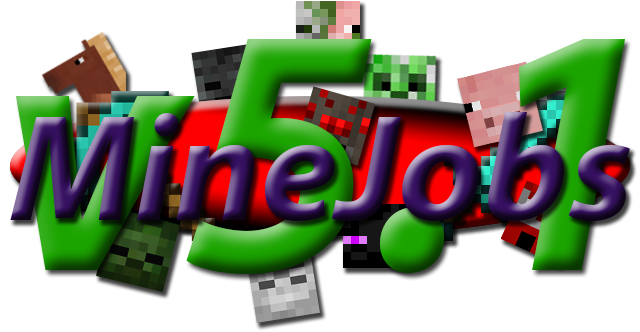
<style>
.page{position:relative;width:640px;height:332px;background:#ffffff}
.page>*{position:absolute;margin:0}
.t1{font:355.6px "MyriadPro-BoldIt"}
.t2{font:152.4px "MyriadPro-BoldIt"}
</style>
<div class="page">
<p class="t1" style="left:16px;top:39px;width:609px;height:235px">v5.1</p>
<p class="t2" style="left:10px;top:112px;width:620px;height:110px">MineJobs</p>
</div>
